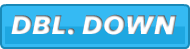
<style>
.page{position:relative;width:190px;height:49px;background:#35baf3}
.page>*{position:absolute;margin:0}
.t1{font:30px "FreightSansBlackItalic";color:#fefefe;text-transform:uppercase}
</style>
<div class="page">
<p class="t1" style="left:11px;top:14px;width:166px;height:21px">dbl. down</p>
</div>
